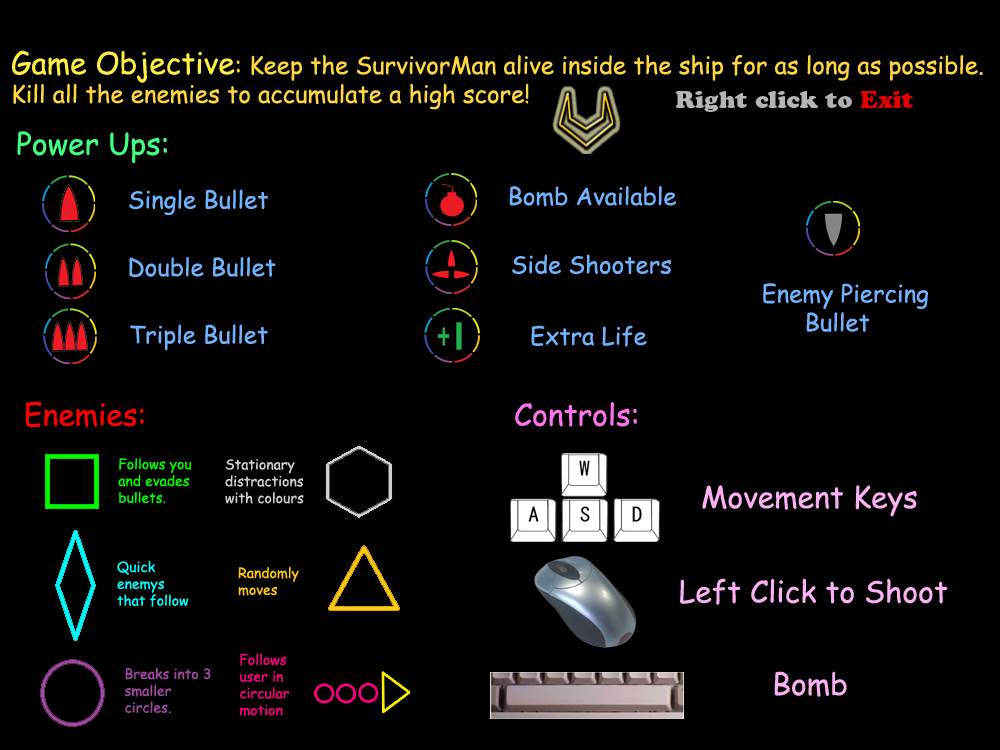
<style>
.page{position:relative;width:1000px;height:750px;background:#000000}
.page>*{position:absolute;margin:0}
.t1{font:24px "ComicSansMS";color:#ffd542}
.t2{font:30px "ComicSansMS";color:#ffef42}
.t3{font:24px "CooperBlackStd";color:#b9b3b3}
.t4{font:24px "CooperBlackStd";color:#b0b0b1}
.t5{font:24px "CooperBlackStd";color:#e50000}
.t6{font:30px "ComicSansMS";color:#42ff80}
.t7{font:24px "ComicSansMS";color:#70b2fb}
.t8{font:30px "ComicSansMS";color:#fb73ed}
.t9{font:30px "ComicSansMS";color:#fd0000}
.t10{font:14px "ComicSansMS";color:#00fd00}
.t11{font:14px "ComicSansMS";color:#cfcfcf}
.t12{font:30px "ComicSansMS";color:#fab1f3}
.t13{font:14px "ComicSansMS";color:#00ffff}
.t14{font:14px "ComicSansMS";color:#ffc90e}
.t15{font:14px "ComicSansMS";color:#ff0080}
.t16{font:14px "ComicSansMS";color:#a349a4}
</style>
<div class="page">
<p class="t1" style="left:12px;top:50px;width:971px;height:60px"><span class="t2">Game Objective</span>: Keep the SurvivorMan alive inside the ship for as long as possible. Kill all the enemies to accumulate a high score!</p>
<p class="t3" style="left:675px;top:90px;width:238px;height:22px">Right click<span class="t4"> to </span><span class="t5">Exit</span></p>
<p class="t6" style="left:17px;top:131px;width:150px;height:32px">Power Ups:</p>
<p class="t7" style="left:509px;top:185px;width:168px;height:22px">Bomb Available</p>
<p class="t7" style="left:129px;top:189px;width:139px;height:26px">Single Bullet</p>
<p class="t7" style="left:129px;top:257px;width:147px;height:21px">Double Bullet</p>
<p class="t7" style="left:512px;top:254px;width:159px;height:21px">Side Shooters</p>
<p class="t7" style="left:763px;top:283px;width:165px;height:49px">Enemy Piercing<br>      Bullet</p>
<p class="t7" style="left:130px;top:324px;width:138px;height:27px">Triple Bullet</p>
<p class="t7" style="left:531px;top:325px;width:116px;height:22px">Extra Life</p>
<p class="t8" style="left:25px;top:401px;width:612px;height:27px"><span class="t9">Enemies:                                         </span>Controls:</p>
<p class="t10" style="left:118px;top:458px;width:74px;height:46px">Follows you<br>and evades<br>bullets.</p>
<p class="t11" style="left:225px;top:459px;width:79px;height:45px">Stationary distractions with colours</p>
<p class="t12" style="left:702px;top:485px;width:215px;height:32px">Movement Keys</p>
<p class="t13" style="left:117px;top:560px;width:72px;height:47px">Quick enemys that follow</p>
<p class="t14" style="left:238px;top:566px;width:61px;height:30px">Randomly moves</p>
<p class="t12" style="left:680px;top:578px;width:268px;height:27px">Left Click to Shoot</p>
<p class="t15" style="left:240px;top:653px;width:49px;height:63px">Follows user in circular motion</p>
<p class="t16" style="left:124px;top:667px;width:87px;height:47px">Breaks into 3 smaller circles.</p>
<p class="t12" style="left:774px;top:671px;width:73px;height:26px">Bomb</p>
</div>
